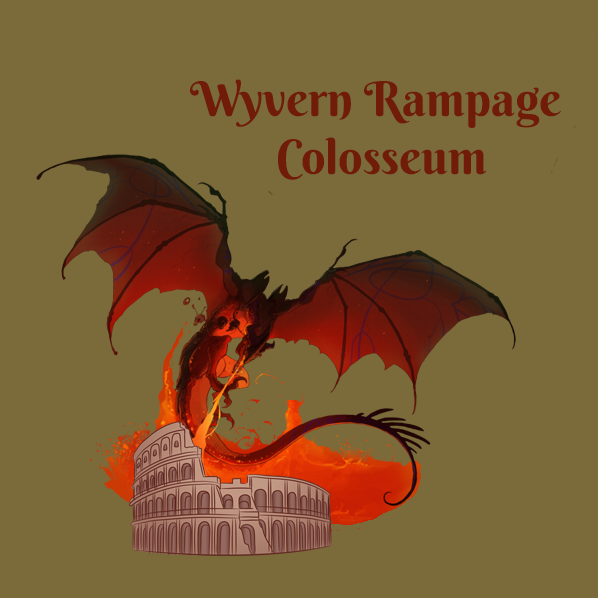
<style>
.page{position:relative;width:598px;height:598px;background:#7b6b3b}
.page>*{position:absolute;margin:0}
.t1{font:48px "BerkshireSwash-Regular";color:#711b09}
</style>
<div class="page">
<p class="t1" style="left:190px;top:79px;width:371px;height:101px;text-align:center">Wyvern Rampage <br>Colosseum</p>
</div>
